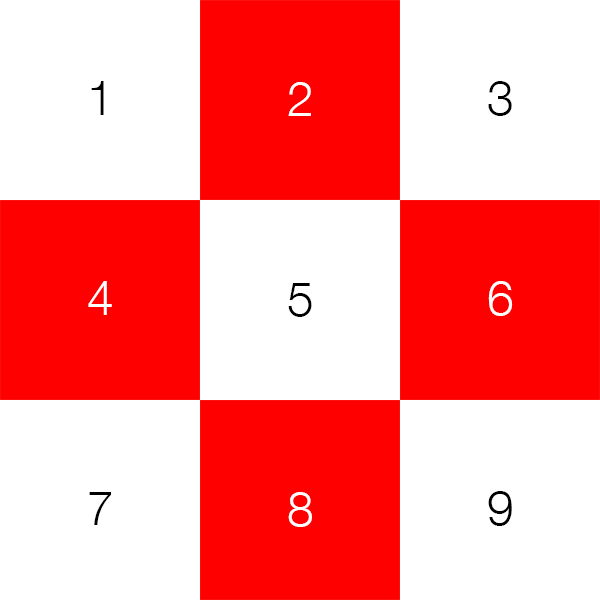
<style>
.page{position:relative;width:600px;height:600px;background:#ffffff}
.page>*{position:absolute;margin:0}
.t1{font:48px "HelveticaNeue-Light";color:#000000}
.t2{font:48px "HelveticaNeue-Light";color:#ffffff}
</style>
<div class="page">
<p class="t1" style="left:91px;top:81px;width:13px;height:34px">1</p>
<p class="t2" style="left:288px;top:82px;width:23px;height:34px">2</p>
<p class="t1" style="left:488px;top:81px;width:24px;height:35px">3</p>
<p class="t2" style="left:88px;top:281px;width:24px;height:34px">4</p>
<p class="t2" style="left:488px;top:281px;width:25px;height:35px">6</p>
<p class="t1" style="left:288px;top:283px;width:24px;height:34px">5</p>
<p class="t1" style="left:89px;top:492px;width:22px;height:33px">7</p>
<p class="t2" style="left:288px;top:492px;width:24px;height:35px">8</p>
<p class="t1" style="left:488px;top:491px;width:24px;height:35px">9</p>
</div>
